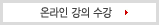
<style>
.page{position:relative;width:159px;height:25px;background:#ffffff}
.page>*{position:absolute;margin:0}
.t1{font:11.5px "YDIYGO320";color:#404040;text-transform:uppercase;scale:0.87 1}
</style>
<div class="page">
<p class="t1" style="left:40px;top:7px;width:72px;height:11px">온라인 강의 수강</p>
</div>
